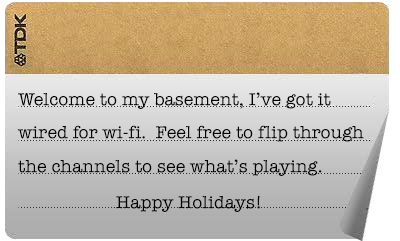
<style>
.page{position:relative;width:400px;height:241px}
.page>*{position:absolute;margin:0}
.t1{font:18px "AmericanTypewriter";letter-spacing:0.01em;color:#000000}
</style>
<div class="page">
<p class="t1" style="left:18px;top:92px;width:313px;height:17px">Welcome to my basement, I’ve got it</p>
<p class="t1" style="left:17px;top:125px;width:347px;height:17px">wired for wi-fi.  Feel free to flip through</p>
<p class="t1" style="left:18px;top:159px;width:304px;height:17px">the channels to see what’s playing.</p>
<p class="t1" style="left:116px;top:195px;width:144px;height:17px">Happy Holidays!</p>
</div>
